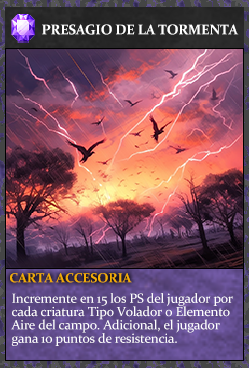
<style>
.page{position:relative;width:249px;height:368px}
.page>*{position:absolute;margin:0}
.t1{font:14px "Constantia-Bold";letter-spacing:-0.02em;color:#ffffff}
.t2{font:13.3px "Constantia-Bold";letter-spacing:-0.02em;color:#f2ac05}
.t3{font:13.3px/13.3px "Constantia";letter-spacing:-0.02em;color:#ffffff}
</style>
<div class="page">
<p class="t1" style="left:42px;top:24px;width:197px;height:11px">PRESAGIO DE LA TORMENTA</p>
<p class="t2" style="left:10px;top:273px;width:122px;height:10px">CARTA ACCESORIA</p>
<p class="t3" style="left:11px;top:293px;width:222px;height:53px">Incremente en 15 los PS del jugador por<br>cada criatura Tipo Volador o Elemento<br>Aire del campo. Adicional, el jugador<br>gana 10 puntos de resistencia.</p>
</div>
